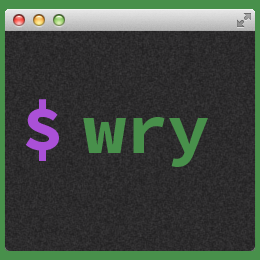
<style>
.page{position:relative;width:260px;height:260px}
.page>*{position:absolute;margin:0}
.t1{font:72px "SourceCodePro-Bold";letter-spacing:-0.01em;color:#aa50d7}
.t2{font:72px "SourceCodePro-Bold";letter-spacing:-0.01em;color:#48904b}
</style>
<div class="page">
<p class="t1" style="left:25px;top:99px;width:34px;height:62px">$</p>
<p class="t2" style="left:83px;top:117px;width:125px;height:50px">wry</p>
</div>
